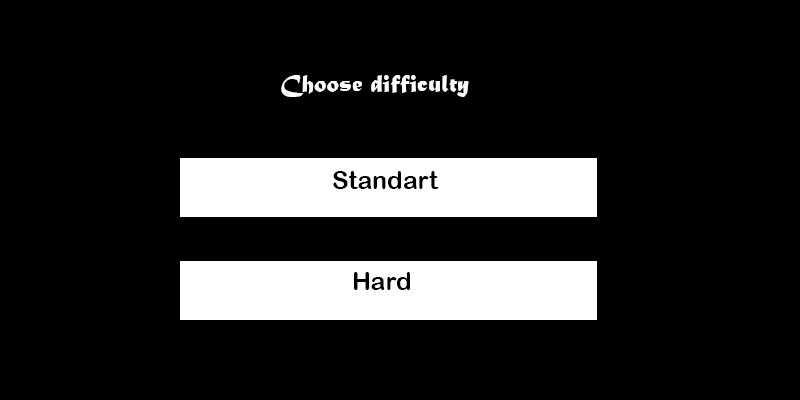
<style>
.page{position:relative;width:800px;height:400px;background:#000000}
.page>*{position:absolute;margin:0}
.t1{font:25px "MaturaMTScriptCapitals";color:#ffffff}
.t2{font:25px "MaturaMTScriptCapitals";color:#000000}
.t3{font:25px "ArialRoundedMTBold";color:#000000}
</style>
<div class="page">
<p class="t1" style="left:281px;top:75px;width:352px;height:23px">Choose difficulty<span class="t2">Lorem Ipsum</span></p>
<p class="t3" style="left:333px;top:171px;width:106px;height:18px">Standart</p>
<p class="t3" style="left:354px;top:272px;width:56px;height:18px">Hard</p>
</div>
